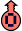
<style>
.page{position:relative;width:22px;height:31px;background:#ffffff}
.page>*{position:absolute;margin:0}
.t1{font:21.8px "04b03";color:#000033}
</style>
<div class="page">
<p class="t1" style="left:3px;top:8px;width:14px;height:22px;rotate:180deg">0</p>
</div>
